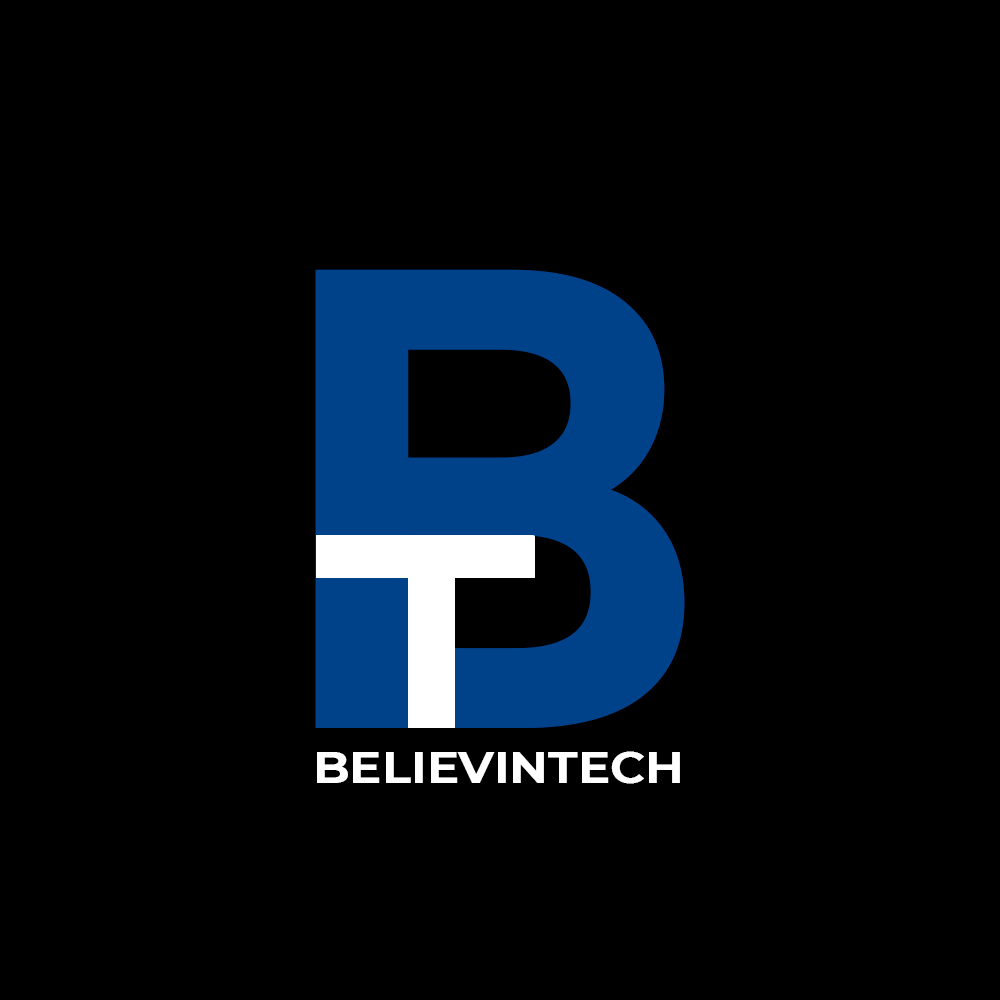
<style>
.page{position:relative;width:1000px;height:1000px;background:#000000}
.page>*{position:absolute;margin:0}
.t1{font:654.6px "Montserrat-Bold";color:#00428a;scale:0.88 1}
.t2{font:44.2px "Montserrat-Bold";color:#ffffff;scale:1.09 1}
</style>
<div class="page">
<p class="t1" style="left:315px;top:269px;width:370px;height:459px">B</p>
<p class="t2" style="left:317px;top:751px;width:363px;height:33px">BELIEVINTECH</p>
</div>
